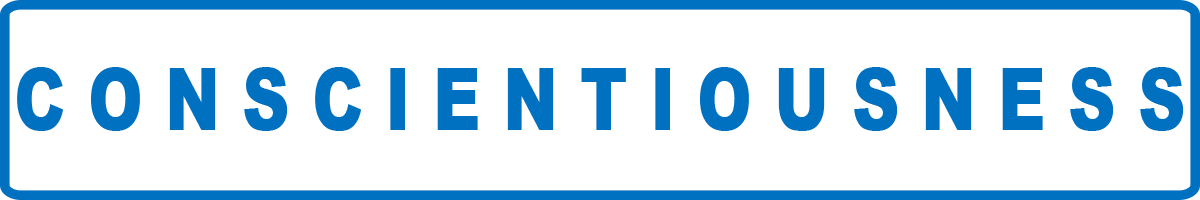
<style>
.page{position:relative;width:1200px;height:200px;background:#ffffff}
.page>*{position:absolute;margin:0}
.t1{font:87.1px "Arial-Black";color:#0070c0;scale:0.76 1}
</style>
<div class="page">
<p class="t1" style="left:17px;top:67px;width:1167px;height:64px">C O N S C I E N T I O U S N E S S</p>
</div>
